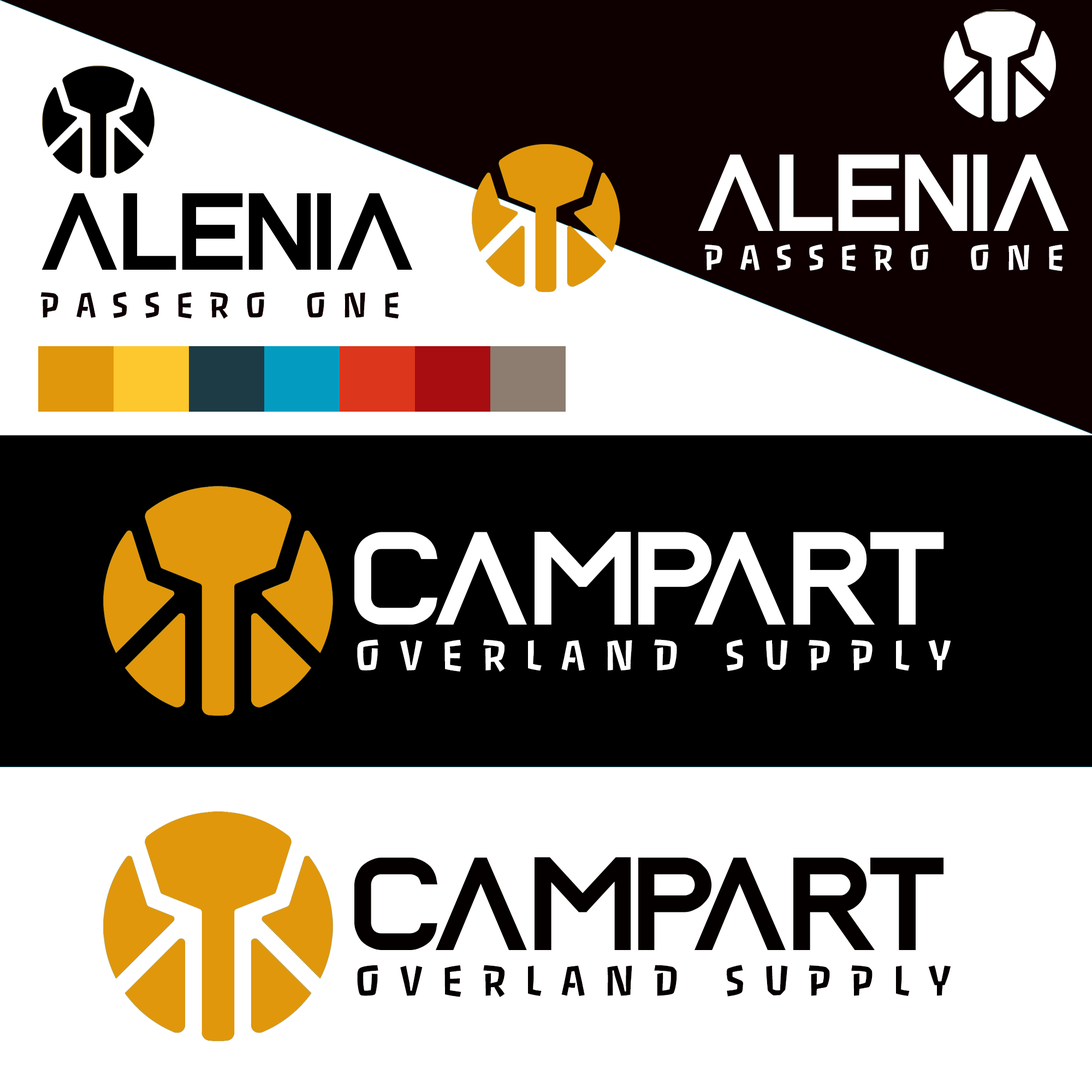
<style>
.page{position:relative;width:1092px;height:1092px;background:#ffffff}
.page>*{position:absolute;margin:0}
.t1{font:107.6px "Alenia";color:#ffffff}
.t2{font:107.6px "Alenia";color:#000000}
.t3{font:39px "PasseroOne-Regular";letter-spacing:0.38em;color:#ffffff}
.t4{font:39px "PasseroOne-Regular";letter-spacing:0.38em;color:#0e0000}
.t5{font:130.5px "Alenia";color:#ffffff}
.t6{font:46.8px "PasseroOne-Regular";letter-spacing:0.38em;color:#ffffff}
.t7{font:130.5px "Alenia";color:#050000}
.t8{font:46.8px "PasseroOne-Regular";letter-spacing:0.38em;color:#050000}
</style>
<div class="page">
<p class="t1" style="left:698px;top:155px;width:371px;height:76px">ALENIA</p>
<p class="t2" style="left:41px;top:193px;width:372px;height:77px">ALENIA</p>
<p class="t3" style="left:704px;top:244px;width:359px;height:27px">PASSERO ONE</p>
<p class="t4" style="left:40px;top:292px;width:359px;height:27px">PASSERO ONE</p>
<p class="t5" style="left:354px;top:532px;width:590px;height:93px">CAMPART</p>
<p class="t6" style="left:357px;top:639px;width:594px;height:33px">OVERLAND SUPPLY</p>
<p class="t7" style="left:354px;top:857px;width:590px;height:93px">CAMPART</p>
<p class="t8" style="left:357px;top:965px;width:594px;height:33px">OVERLAND SUPPLY</p>
</div>
